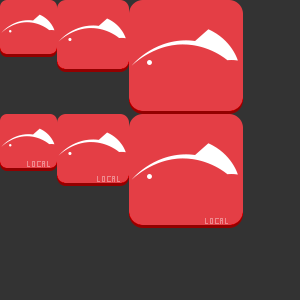
<style>
.page{position:relative;width:300px;height:300px;background:#333333}
.page>*{position:absolute;margin:0}
.t1{font:8px "Krungthep";color:#ee898d;text-transform:uppercase}
</style>
<div class="page">
<p class="t1" style="left:27px;top:161px;width:23px;height:6px">local</p>
<p class="t1" style="left:97px;top:176px;width:23px;height:6px">local</p>
<p class="t1" style="left:205px;top:218px;width:23px;height:6px">local</p>
</div>
